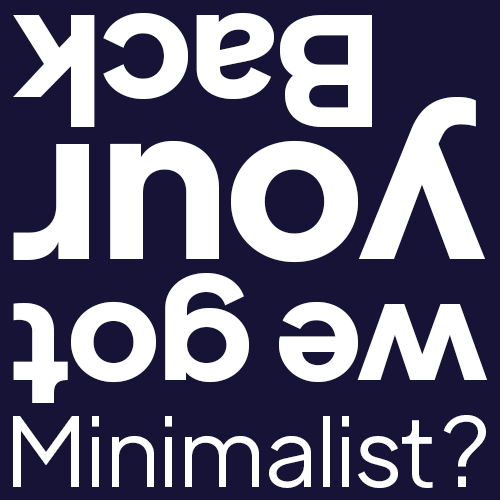
<style>
.page{position:relative;width:500px;height:500px;background:#161336}
.page>*{position:absolute;margin:0}
.t1{font:150.1px "PlusJakartaDisplay-Bold";letter-spacing:-0.003em;color:#ffffff;scale:1.04 1}
.t2{font:210.4px "PlusJakartaDisplay-Bold";letter-spacing:-0.003em;color:#ffffff;scale:1.04 1}
.t3{font:140px "PlusJakartaDisplay-Bold";letter-spacing:-0.003em;color:#ffffff;scale:1.04 1}
.t4{font:95.9px "PlusJakartaDisplay-Light";letter-spacing:-0.003em;color:#ffffff;scale:1.04 1}
</style>
<div class="page">
<p class="t1" style="left:13px;top:13px;width:359px;height:114px;rotate:180deg">Back</p>
<p class="t2" style="left:13px;top:97px;width:472px;height:166px;rotate:180deg">your</p>
<p class="t3" style="left:13px;top:273px;width:474px;height:130px;rotate:180deg">we got</p>
<p class="t4" style="left:13px;top:415px;width:473px;height:73px">Minimalist?</p>
</div>
